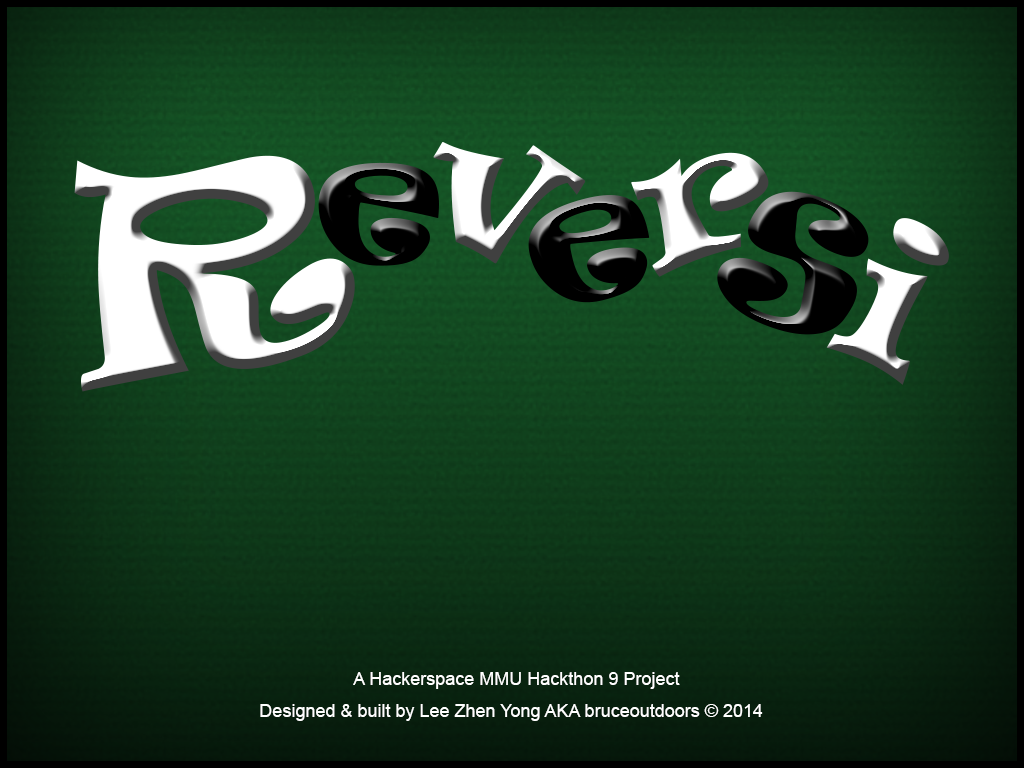
<style>
.page{position:relative;width:1024px;height:768px}
.page>*{position:absolute;margin:0}
.t1{font:18px "ArialMT";color:#ffffff}
</style>
<div class="page">
<p class="t1" style="left:353px;top:672px;width:327px;height:17px">A Hackerspace MMU Hackthon 9 Project</p>
<p class="t1" style="left:260px;top:704px;width:503px;height:17px">Designed &amp; built by Lee Zhen Yong AKA bruceoutdoors © 2014</p>
</div>
